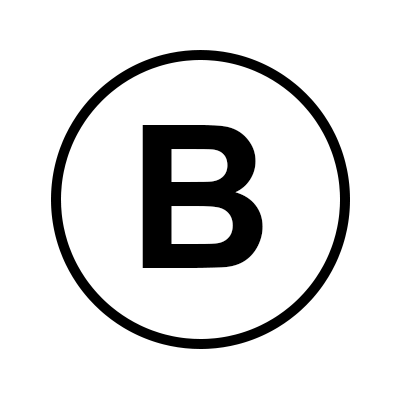
<style>
.page{position:relative;width:400px;height:400px;background:#ffffff}
.page>*{position:absolute;margin:0}
.t1{font:200px "Arial-BoldMT";color:#000000}
</style>
<div class="page">
<p class="t1" style="left:142px;top:125px;width:121px;height:143px">B</p>
</div>
